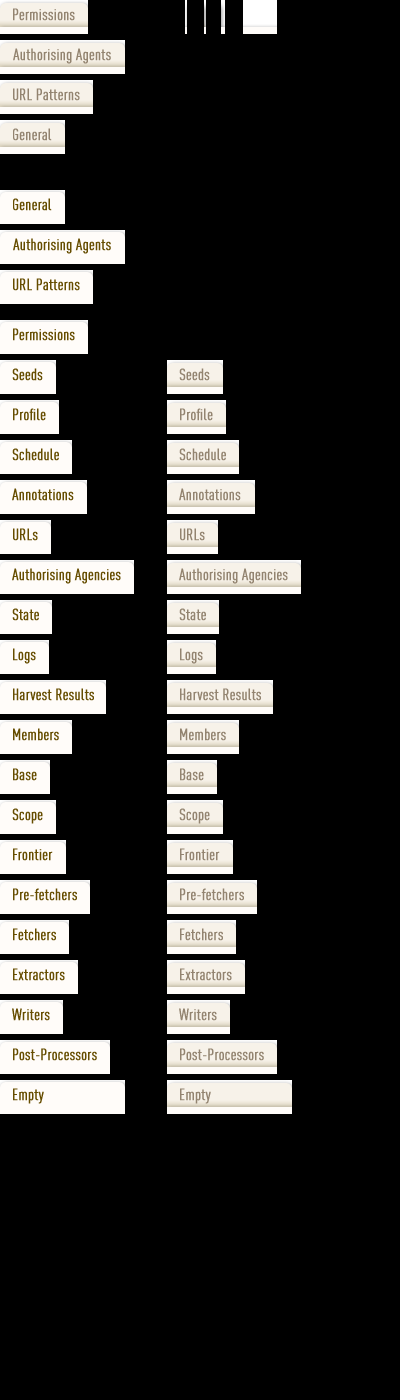
<style>
.page{position:relative;width:400px;height:1400px;background:#000000}
.page>*{position:absolute;margin:0}
.t1{font:16px "DINCond-Regular";color:#938470;font-weight:bold}
.t2{font:16px "DINCond-Regular";color:#664d00;font-weight:bold}
</style>
<div class="page">
<p class="t1" style="left:13px;top:8px;width:62px;height:13px">Permissions</p>
<p class="t1" style="left:13px;top:48px;width:98px;height:16px">Authorising Agents</p>
<p class="t1" style="left:13px;top:88px;width:67px;height:13px">URL Patterns</p>
<p class="t1" style="left:13px;top:128px;width:39px;height:13px">General</p>
<p class="t2" style="left:13px;top:198px;width:39px;height:13px">General</p>
<p class="t2" style="left:13px;top:238px;width:98px;height:16px">Authorising Agents</p>
<p class="t2" style="left:13px;top:278px;width:67px;height:13px">URL Patterns</p>
<p class="t2" style="left:13px;top:328px;width:62px;height:13px">Permissions</p>
<p class="t2" style="left:12px;top:368px;width:31px;height:13px">Seeds</p>
<p class="t1" style="left:179px;top:368px;width:31px;height:13px">Seeds</p>
<p class="t2" style="left:13px;top:408px;width:33px;height:13px">Profile</p>
<p class="t1" style="left:180px;top:408px;width:33px;height:13px">Profile</p>
<p class="t2" style="left:12px;top:448px;width:47px;height:13px">Schedule</p>
<p class="t1" style="left:179px;top:448px;width:47px;height:13px">Schedule</p>
<p class="t2" style="left:12px;top:488px;width:62px;height:13px">Annotations</p>
<p class="t1" style="left:179px;top:488px;width:62px;height:13px">Annotations</p>
<p class="t2" style="left:13px;top:528px;width:25px;height:13px">URLs</p>
<p class="t1" style="left:180px;top:528px;width:25px;height:13px">URLs</p>
<p class="t2" style="left:12px;top:568px;width:109px;height:16px">Authorising Agencies</p>
<p class="t1" style="left:179px;top:568px;width:109px;height:16px">Authorising Agencies</p>
<p class="t2" style="left:12px;top:608px;width:27px;height:13px">State</p>
<p class="t1" style="left:179px;top:608px;width:27px;height:13px">State</p>
<p class="t2" style="left:13px;top:648px;width:23px;height:16px">Logs</p>
<p class="t1" style="left:180px;top:648px;width:23px;height:16px">Logs</p>
<p class="t2" style="left:13px;top:688px;width:81px;height:13px">Harvest Results</p>
<p class="t1" style="left:180px;top:688px;width:81px;height:13px">Harvest Results</p>
<p class="t2" style="left:13px;top:728px;width:46px;height:13px">Members</p>
<p class="t1" style="left:180px;top:728px;width:46px;height:13px">Members</p>
<p class="t2" style="left:13px;top:768px;width:24px;height:13px">Base</p>
<p class="t1" style="left:180px;top:768px;width:24px;height:13px">Base</p>
<p class="t2" style="left:12px;top:808px;width:31px;height:16px">Scope</p>
<p class="t1" style="left:179px;top:808px;width:31px;height:16px">Scope</p>
<p class="t2" style="left:13px;top:848px;width:40px;height:13px">Frontier</p>
<p class="t1" style="left:180px;top:848px;width:40px;height:13px">Frontier</p>
<p class="t2" style="left:13px;top:888px;width:64px;height:13px">Pre-fetchers</p>
<p class="t1" style="left:180px;top:888px;width:64px;height:13px">Pre-fetchers</p>
<p class="t2" style="left:13px;top:928px;width:43px;height:13px">Fetchers</p>
<p class="t1" style="left:180px;top:928px;width:43px;height:13px">Fetchers</p>
<p class="t2" style="left:13px;top:968px;width:52px;height:13px">Extractors</p>
<p class="t1" style="left:180px;top:968px;width:52px;height:13px">Extractors</p>
<p class="t2" style="left:12px;top:1008px;width:38px;height:13px">Writers</p>
<p class="t1" style="left:179px;top:1008px;width:38px;height:13px">Writers</p>
<p class="t2" style="left:13px;top:1048px;width:84px;height:13px">Post-Processors</p>
<p class="t1" style="left:180px;top:1048px;width:84px;height:13px">Post-Processors</p>
<p class="t2" style="left:13px;top:1088px;width:31px;height:16px">Empty</p>
<p class="t1" style="left:180px;top:1088px;width:31px;height:16px">Empty</p>
</div>
